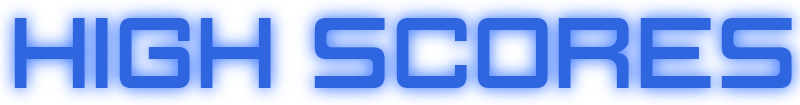
<style>
.page{position:relative;width:800px;height:105px;background:#2f66e0}
.page>*{position:absolute;margin:0}
.t1{font:119px "IgnisetGlaciesSharp";color:#2f66e0}
</style>
<div class="page">
<p class="t1" style="left:14px;top:18px;width:778px;height:70px">HIGH SCORES</p>
</div>
